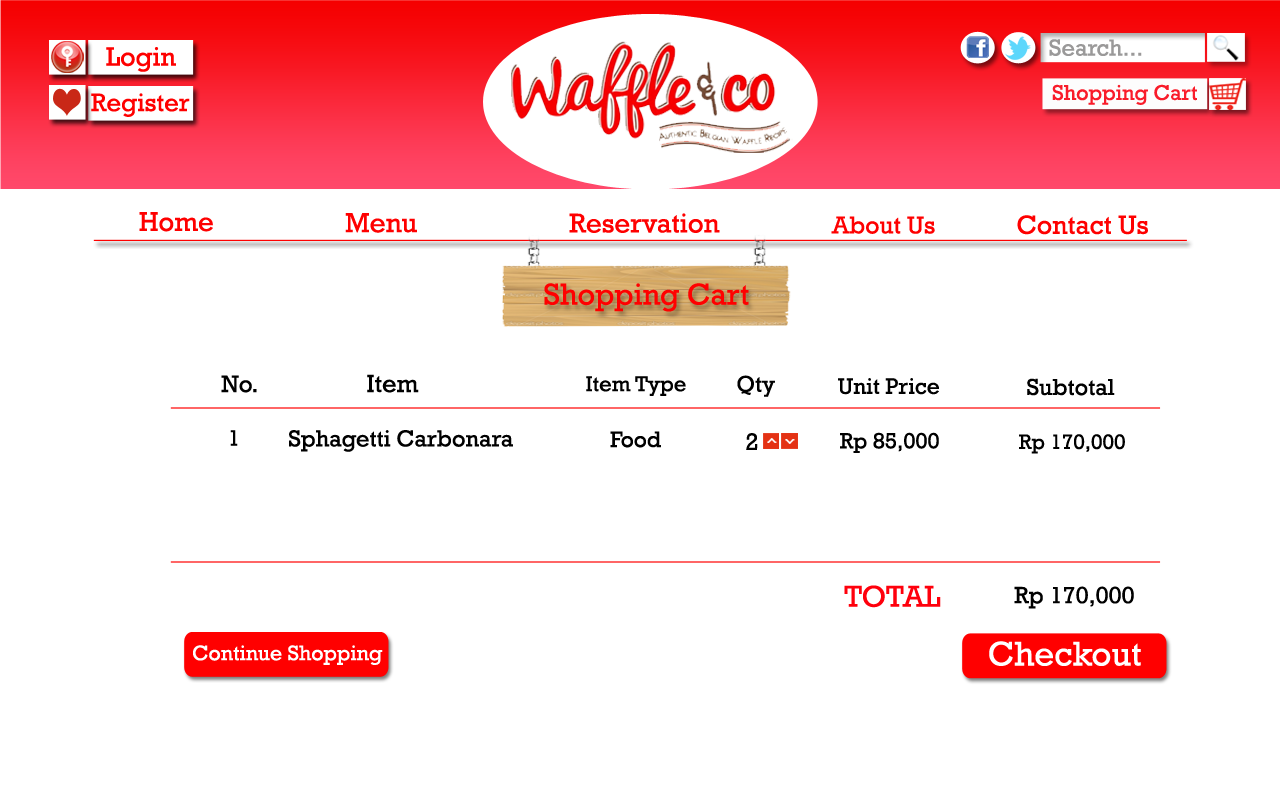
<style>
.page{position:relative;width:1280px;height:800px;background:#ffffff}
.page>*{position:absolute;margin:0}
.t1{font:27.5px "Rockwell";color:#fe0000}
.t2{font:28px "Rockwell";color:#fe0000}
.t3{font:27.6px "Rockwell";color:#fe0000}
.t4{font:24.9px "Rockwell";color:#fe0000}
.t5{font:26.7px "Rockwell";color:#fe0000}
.t6{font:30.7px "Rockwell";color:#ff0000}
.t7{font:24.1px "Rockwell";color:#000000}
.t8{font:25.2px "Rockwell";color:#000000}
.t9{font:21.9px "Rockwell";color:#000000}
.t10{font:23.3px "Rockwell";color:#000000}
.t11{font:22.7px "Rockwell";color:#000000}
.t12{font:23.5px "Rockwell";color:#000000}
.t13{font:22.6px "Rockwell";color:#000000}
.t14{font:23.6px "Rockwell";color:#000000}
.t15{font:24.2px "Rockwell";color:#000000}
.t16{font:22.2px "Rockwell";color:#000000}
.t17{font:21.2px "Rockwell";color:#000000}
.t18{font:23.9px "Rockwell";color:#000000}
.t19{font:34.9px "Rockwell";color:#ffffff}
.t20{font:21.4px "Rockwell";color:#ffffff}
</style>
<div class="page">
<p class="t1" style="left:139px;top:212px;width:74px;height:20px">Home</p>
<p class="t2" style="left:345px;top:213px;width:72px;height:20px">Menu</p>
<p class="t3" style="left:569px;top:213px;width:151px;height:20px">Reservation</p>
<p class="t4" style="left:831px;top:216px;width:104px;height:18px">About Us</p>
<p class="t5" style="left:1017px;top:215px;width:131px;height:20px">Contact Us</p>
<p class="t6" style="left:544px;top:283px;width:205px;height:29px">Shopping Cart</p>
<p class="t7" style="left:221px;top:375px;width:36px;height:18px">No.</p>
<p class="t8" style="left:367px;top:374px;width:52px;height:19px">Item</p>
<p class="t9" style="left:586px;top:376px;width:100px;height:20px">Item Type</p>
<p class="t10" style="left:737px;top:375px;width:38px;height:22px">Qty</p>
<p class="t11" style="left:838px;top:378px;width:101px;height:17px">Unit Price</p>
<p class="t12" style="left:1027px;top:378px;width:88px;height:18px">Subtotal</p>
<p class="t13" style="left:230px;top:430px;width:8px;height:16px">1</p>
<p class="t14" style="left:289px;top:430px;width:224px;height:22px">Sphagetti Carbonara</p>
<p class="t11" style="left:610px;top:431px;width:51px;height:17px">Food</p>
<p class="t15" style="left:746px;top:433px;width:12px;height:17px">2</p>
<p class="t16" style="left:840px;top:432px;width:99px;height:21px">Rp 85,000</p>
<p class="t17" style="left:1019px;top:434px;width:106px;height:20px">Rp 170,000</p>
<p class="t6" style="left:844px;top:585px;width:97px;height:23px">TOTAL</p>
<p class="t18" style="left:1014px;top:586px;width:120px;height:23px">Rp 170,000</p>
<p class="t19" style="left:989px;top:641px;width:152px;height:25px">Checkout</p>
<p class="t20" style="left:193px;top:645px;width:190px;height:20px">Continue Shopping</p>
</div>
